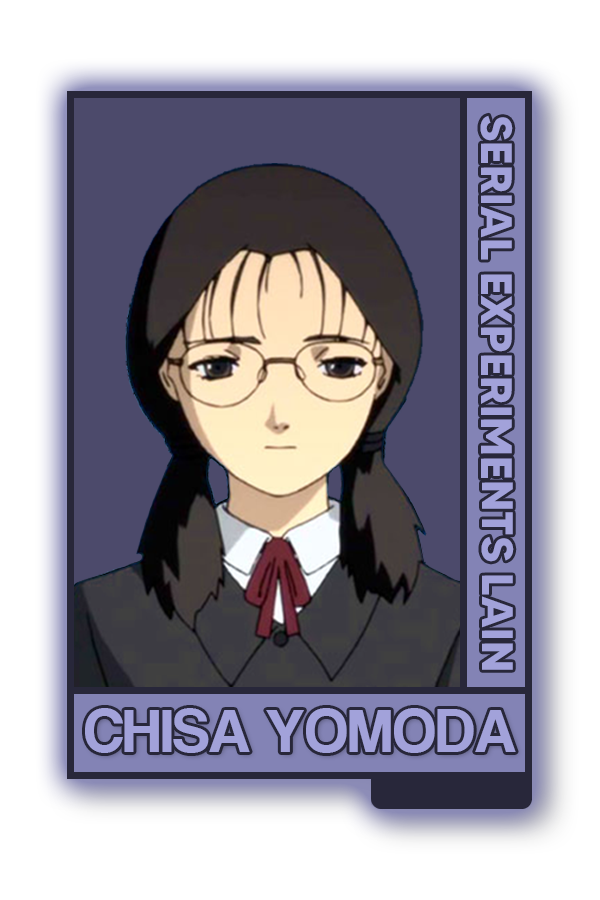
<style>
.page{position:relative;width:600px;height:900px;background:#ffffff}
.page>*{position:absolute;margin:0}
.t1{font:43.8px "MADETOMMY-Bold";color:#a2a2da}
.t2{font:64.3px "CoolveticaRg-Regular";color:#a2a2da}
</style>
<div class="page">
<p class="t1" style="left:480px;top:115px;width:34px;height:555px;rotate:90deg">SERIAL EXPERIMENTS LAIN</p>
<p class="t2" style="left:85px;top:708px;width:431px;height:45px">CHISA YOMODA</p>
</div>
